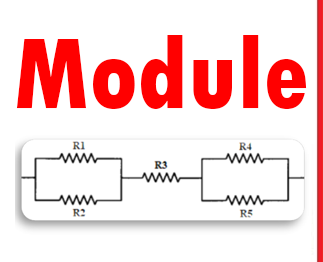
<style>
.page{position:relative;width:323px;height:262px;background:#ffffff}
.page>*{position:absolute;margin:0}
.t1{font:105.6px "TwCenMT-CondensedExtraBold";color:#ff0000}
</style>
<div class="page">
<p class="t1" style="left:16px;top:35px;width:291px;height:74px">Module</p>
</div>
